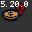
<style>
.page{position:relative;width:32px;height:32px;background:#333333}
.page>*{position:absolute;margin:0}
.t1{font:9px "Consolas";letter-spacing:-0.038em;color:#ffffff}
.t2{font:9px "Consolas";letter-spacing:0.1em;color:#ffffff}
</style>
<div class="page">
<p class="t1" style="left:1px;top:1px;width:27px;height:6px">5.<span class="t2">2</span>0.0</p>
</div>
